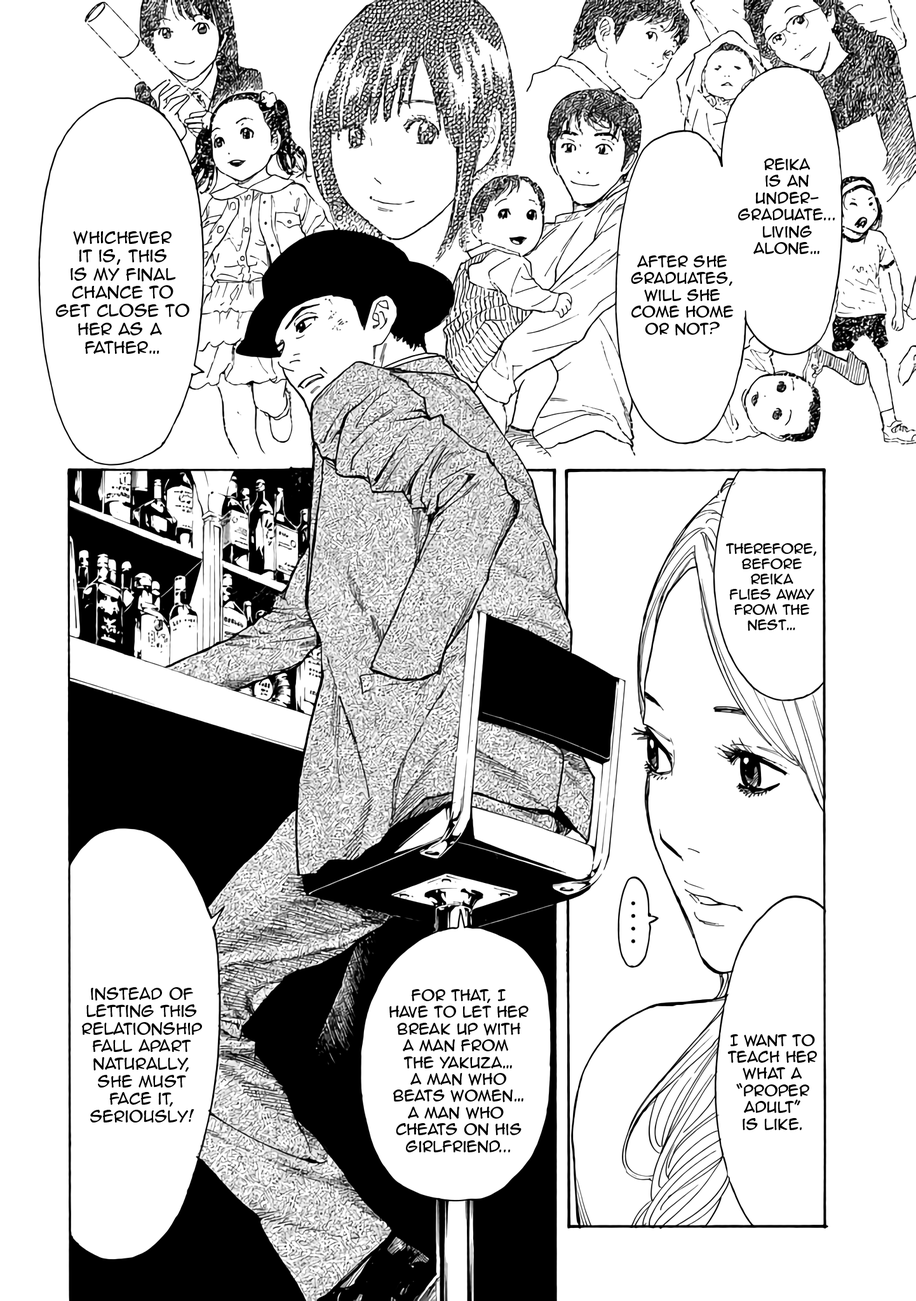
<style>
.page{position:relative;width:916px;height:1301px;background:#ffffff}
.page>*{position:absolute;margin:0}
.t1{font:14px "AnimeAce2.0BB";color:#000000}
.t2{font:15.3px "AnimeAce2.0BB";color:#000000}
.t3{font:12.7px "AnimeAce2.0BB";color:#000000}
.t4{font:14.6px "AnimeAce2.0BB";color:#000000}
</style>
<div class="page">
<p class="t1" style="left:738px;top:158px;width:98px;height:97px;text-align:center">Reika<br>is AN<br>under-<br>graduate...<br>living<br>alone…</p>
<p class="t2" style="left:56px;top:231px;width:133px;height:123px;text-align:center">Whichever<br>it is, this<br>is my final<br>chance to<br>get close to<br>her as a <br>father…</p>
<p class="t1" style="left:631px;top:255px;width:103px;height:81px;text-align:center">After she<br>graduates,<br>will she<br>come home<br>or not?</p>
<p class="t3" style="left:726px;top:543px;width:91px;height:88px;text-align:center">Therefore,<br>before<br>Reika<br>flies away<br>from the<br>nest…</p>
<p class="t4" style="left:82px;top:987px;width:120px;height:136px;text-align:center">instead of<br>letting this<br>relationship<br>fall apart<br>naturally,<br>she must<br>face it,<br>seriously!</p>
<p class="t1" style="left:390px;top:989px;width:139px;height:164px;text-align:center">For that, I<br>have to let her<br>break up with<br>a man from <br>the Yakuza…<br>a man who<br>beats women…<br>a man who <br>cheats on his<br>girlfriend...</p>
<p class="t1" style="left:728px;top:1034px;width:89px;height:96px;text-align:center">I want to<br>teach her<br>what a<br>“proper<br>adult”<br>is like.</p>
</div>
